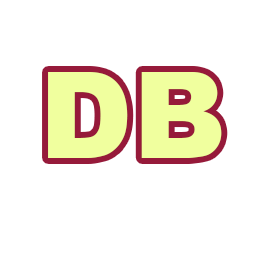
<style>
.page{position:relative;width:256px;height:256px;background:#ffffff}
.page>*{position:absolute;margin:0}
.t1{font:120px "Arial-Black";color:#f0ff9e}
</style>
<div class="page">
<p class="t1" style="left:48px;top:72px;width:174px;height:86px">DB</p>
</div>
